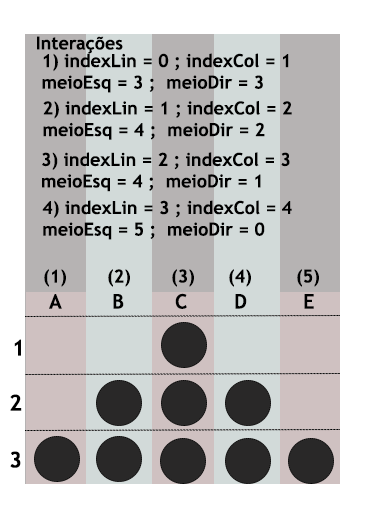
<style>
.page{position:relative;width:365px;height:512px;background:#d2dad9}
.page>*{position:absolute;margin:0}
.t1{font:18px "TrebuchetMS-Bold";color:#000000}
.t2{font:20px "TrebuchetMS-Bold";color:#000000}
.t3{font:22px "TrebuchetMS-Bold";color:#000000}
</style>
<div class="page">
<p class="t1" style="left:37px;top:36px;width:86px;height:18px">Interações</p>
<p class="t1" style="left:42px;top:53px;width:247px;height:40px">1) indexLin = 0 ; indexCol = 1<br>meioEsq = 3 ;  meioDir = 3</p>
<p class="t1" style="left:43px;top:100px;width:249px;height:40px">2) indexLin = 1 ; indexCol = 2<br>meioEsq = 4 ;  meioDir = 2</p>
<p class="t1" style="left:42px;top:152px;width:248px;height:40px">3) indexLin = 2 ; indexCol = 3<br>meioEsq = 4 ;  meioDir = 1</p>
<p class="t1" style="left:42px;top:200px;width:250px;height:40px">4) indexLin = 3 ; indexCol = 4<br>meioEsq = 5 ;  meioDir = 0</p>
<p class="t1" style="left:44px;top:269px;width:22px;height:18px">(1)</p>
<p class="t1" style="left:108px;top:269px;width:22px;height:18px">(2)</p>
<p class="t1" style="left:172px;top:269px;width:22px;height:18px">(3)</p>
<p class="t1" style="left:229px;top:269px;width:22px;height:18px">(4)</p>
<p class="t1" style="left:297px;top:269px;width:22px;height:18px">(5)</p>
<p class="t2" style="left:49px;top:294px;width:13px;height:15px">A</p>
<p class="t2" style="left:113px;top:294px;width:11px;height:15px">B</p>
<p class="t2" style="left:175px;top:293px;width:12px;height:16px">C</p>
<p class="t2" style="left:235px;top:294px;width:12px;height:15px">D</p>
<p class="t2" style="left:304px;top:294px;width:10px;height:15px">E</p>
<p class="t3" style="left:14px;top:339px;width:7px;height:17px">1</p>
<p class="t3" style="left:10px;top:394px;width:12px;height:17px">2</p>
<p class="t3" style="left:10px;top:451px;width:11px;height:17px">3</p>
</div>
